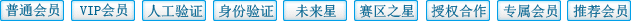
<style>
.page{position:relative;width:631px;height:21px}
.page>*{position:absolute;margin:0}
.t1{font:14px "SimSun";text-transform:uppercase}
.t2{font:14px "SimSun";color:#026390;text-transform:uppercase}
</style>
<div class="page">
<p class="t1" style="left:5px;top:3px;width:55px;height:14px">普通会员</p>
<p class="t2" style="left:80px;top:3px;width:48px;height:14px">VIP会员</p>
<p class="t2" style="left:147px;top:4px;width:56px;height:14px">人工验证</p>
<p class="t1" style="left:219px;top:4px;width:55px;height:14px">身份验证</p>
<p class="t2" style="left:295px;top:4px;width:41px;height:14px">未来星</p>
<p class="t2" style="left:359px;top:4px;width:55px;height:14px">赛区之星</p>
<p class="t2" style="left:431px;top:4px;width:55px;height:14px">授权合作</p>
<p class="t2" style="left:503px;top:4px;width:55px;height:14px">专属会员</p>
<p class="t1" style="left:573px;top:4px;width:55px;height:14px">推荐会员</p>
</div>
